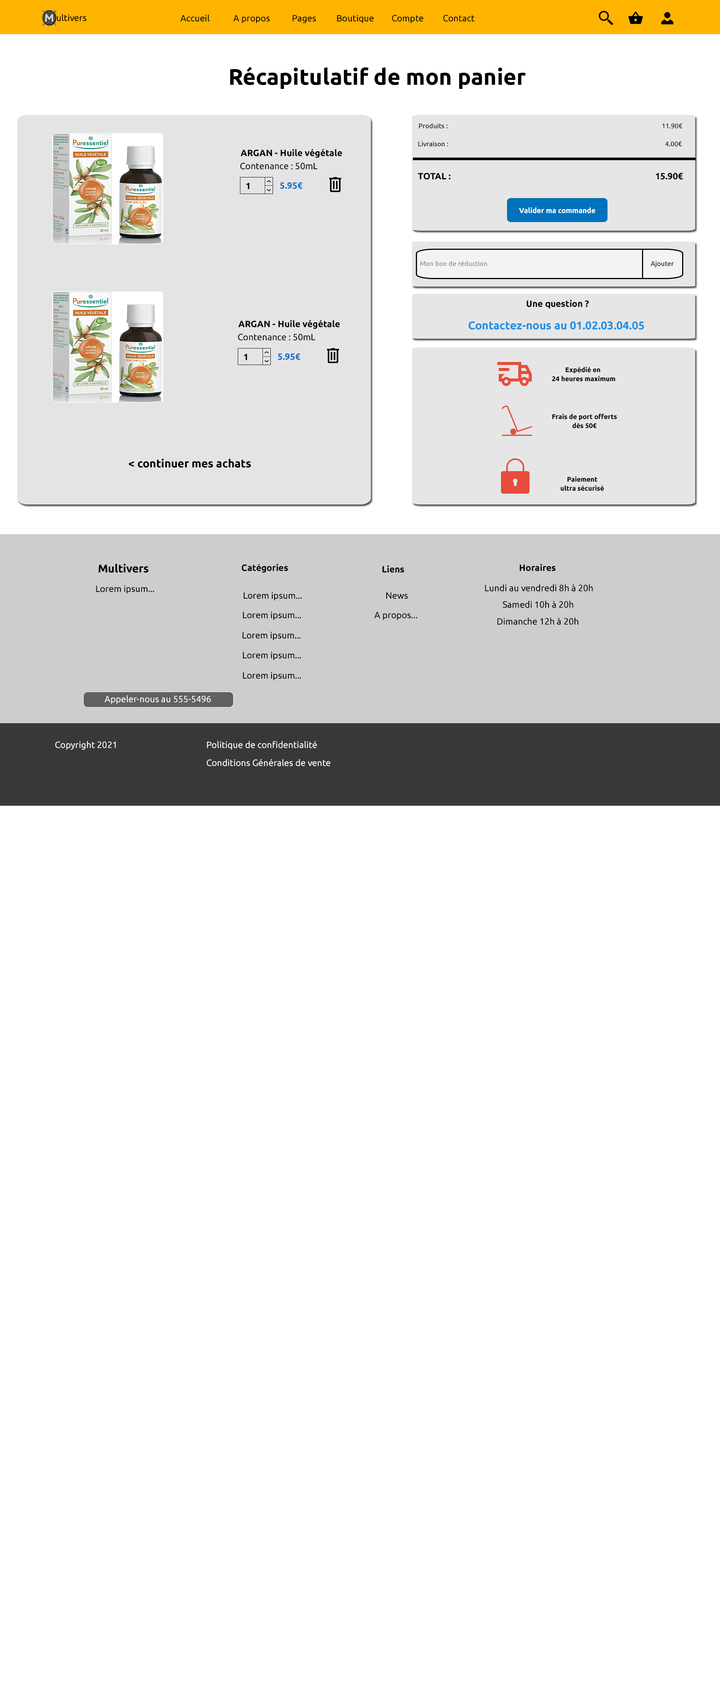
<style>
.page{position:relative;width:720px;height:1688px;background:#ffffff}
.page>*{position:absolute;margin:0}
.t1{font:9px "Ubuntu-Regular";color:#000000}
.t2{font:22.5px "Ubuntu-Bold";color:#000000}
.t3{font:6.8px/9px "Ubuntu-Regular";color:#000000}
.t4{font:6.8px "Ubuntu-Regular";color:#000000}
.t5{font:9px "Ubuntu-Bold";color:#000000}
.t6{font:9px "Ubuntu-Bold";color:#0f6ed0}
.t7{font:7.4px "Ubuntu-Bold";color:#ffffff}
.t8{font:6.8px "Ubuntu-Regular";color:#858585}
.t9{font:11.2px "Ubuntu-Bold";color:#218fe4}
.t10{font:6.8px/9px "Ubuntu-Bold";color:#000000}
.t11{font:11.2px "Ubuntu-Bold";color:#000000}
.t12{font:9px "Ubuntu-Regular";color:#ffffff}
.t13{font:9px/9px "Ubuntu-Regular";color:#ffffff}
</style>
<div class="page">
<p class="t1" style="left:49px;top:14px;width:38px;height:7px">Multivers</p>
<p class="t1" style="left:180px;top:14px;width:30px;height:8px">Accueil</p>
<p class="t1" style="left:233px;top:15px;width:37px;height:8px">A propos</p>
<p class="t1" style="left:292px;top:15px;width:24px;height:8px">Pages</p>
<p class="t1" style="left:337px;top:15px;width:37px;height:8px">Boutique</p>
<p class="t1" style="left:392px;top:15px;width:31px;height:8px">Compte</p>
<p class="t1" style="left:443px;top:15px;width:32px;height:7px">Contact</p>
<p class="t2" style="left:230px;top:67px;width:296px;height:22px">Récapitulatif de mon panier</p>
<p class="t3" style="left:418px;top:123px;width:30px;height:23px;text-align:center">Produits :<br><br>Livraison :</p>
<p class="t4" style="left:662px;top:123px;width:20px;height:6px">11.90€</p>
<p class="t5" style="left:240px;top:149px;width:102px;height:9px">ARGAN - Huile végétale</p>
<p class="t4" style="left:665px;top:141px;width:17px;height:6px">4.00€</p>
<p class="t1" style="left:240px;top:163px;width:78px;height:7px">Contenance : 50mL</p>
<p class="t5" style="left:418px;top:172px;width:33px;height:8px">TOTAL :</p>
<p class="t5" style="left:656px;top:172px;width:27px;height:8px">15.90€</p>
<p class="t5" style="left:246px;top:183px;width:3px;height:6px">1</p>
<p class="t6" style="left:280px;top:182px;width:23px;height:7px">5.95€</p>
<p class="t7" style="left:519px;top:207px;width:77px;height:6px">Valider ma commande</p>
<p class="t8" style="left:420px;top:261px;width:67px;height:5px">Mon bon de réduction</p>
<p class="t4" style="left:651px;top:261px;width:23px;height:6px">Ajouter</p>
<p class="t5" style="left:526px;top:300px;width:63px;height:9px">Une question ?</p>
<p class="t5" style="left:238px;top:320px;width:102px;height:9px">ARGAN - Huile végétale</p>
<p class="t9" style="left:468px;top:321px;width:176px;height:9px">Contactez-nous au 01.02.03.04.05</p>
<p class="t1" style="left:238px;top:334px;width:77px;height:6px">Contenance : 50mL</p>
<p class="t5" style="left:244px;top:354px;width:3px;height:6px">1</p>
<p class="t6" style="left:278px;top:353px;width:22px;height:7px">5.95€</p>
<p class="t10" style="left:552px;top:366px;width:63px;height:15px;text-align:center">Expédié en <br>24 heures maximum</p>
<p class="t10" style="left:552px;top:414px;width:65px;height:14px;text-align:center">Frais de port offerts<br>dès 50€</p>
<p class="t11" style="left:129px;top:458px;width:122px;height:10px">&lt; continuer mes achats</p>
<p class="t10" style="left:561px;top:476px;width:43px;height:15px;text-align:center">Paiement<br>ultra sécurisé</p>
<p class="t11" style="left:98px;top:563px;width:50px;height:10px">Multivers</p>
<p class="t5" style="left:242px;top:564px;width:46px;height:9px">Catégories</p>
<p class="t5" style="left:382px;top:565px;width:22px;height:8px">Liens</p>
<p class="t5" style="left:520px;top:564px;width:36px;height:7px">Horaires</p>
<p class="t1" style="left:96px;top:585px;width:58px;height:9px">Lorem ipsum...</p>
<p class="t1" style="left:244px;top:592px;width:58px;height:8px">Lorem ipsum...</p>
<p class="t1" style="left:386px;top:592px;width:22px;height:7px">News</p>
<p class="t1" style="left:485px;top:584px;width:108px;height:7px">Lundi au vendredi 8h à 20h</p>
<p class="t1" style="left:502px;top:600px;width:71px;height:8px">Samedi 10h à 20h</p>
<p class="t1" style="left:243px;top:611px;width:58px;height:9px">Lorem ipsum...</p>
<p class="t1" style="left:374px;top:612px;width:43px;height:8px">A propos...</p>
<p class="t1" style="left:497px;top:617px;width:81px;height:8px">Dimanche 12h à 20h</p>
<p class="t1" style="left:243px;top:632px;width:58px;height:8px">Lorem ipsum...</p>
<p class="t1" style="left:243px;top:651px;width:58px;height:9px">Lorem ipsum...</p>
<p class="t1" style="left:243px;top:672px;width:58px;height:8px">Lorem ipsum...</p>
<p class="t12" style="left:104px;top:695px;width:107px;height:9px">Appeler-nous au 555-5496</p>
<p class="t12" style="left:55px;top:741px;width:61px;height:9px">Copyright 2021</p>
<p class="t13" style="left:207px;top:741px;width:123px;height:25px">Politique de confidentialité<br><br>Conditions Générales de vente</p>
</div>
